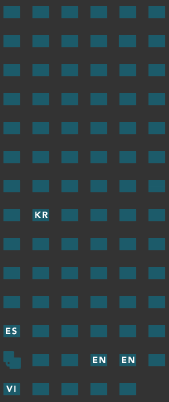
<style>
.page{position:relative;width:169px;height:402px;background:#333333}
.page>*{position:absolute;margin:0}
.t1{font:9px "Avenir-Black";letter-spacing:0.1em;color:#ffffff;text-transform:uppercase}
</style>
<div class="page">
<p class="t1" style="left:35px;top:211px;width:13px;height:7px">kr</p>
<p class="t1" style="left:6px;top:327px;width:11px;height:8px">ES</p>
<p class="t1" style="left:93px;top:356px;width:13px;height:7px">en</p>
<p class="t1" style="left:122px;top:356px;width:13px;height:7px">en</p>
<p class="t1" style="left:6px;top:385px;width:10px;height:7px">vi</p>
</div>
